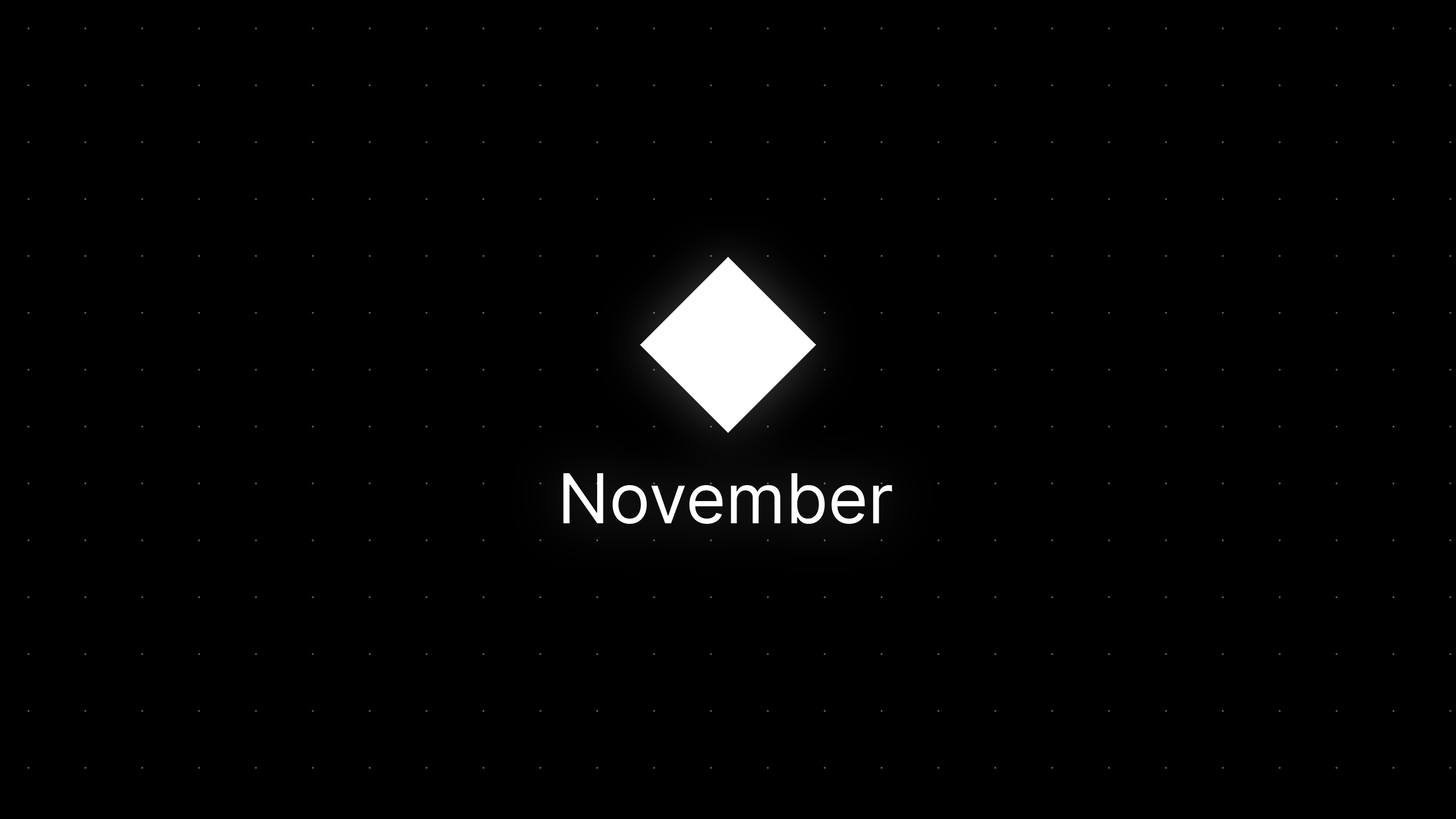
<style>
.page{position:relative;width:1456px;height:819px;background:#000000}
.page>*{position:absolute;margin:0}
.t1{font:68.7px "Inter-Regular";color:#ffffff}
</style>
<div class="page">
<p class="t1" style="left:563px;top:473px;width:329px;height:51px">November</p>
</div>
